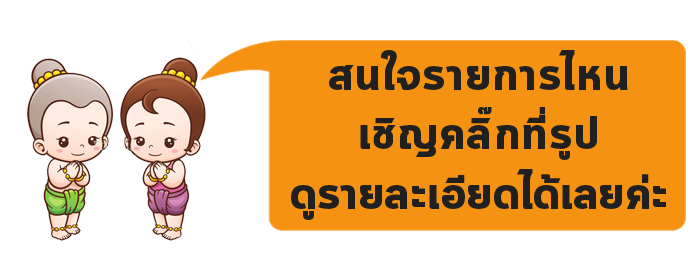
<style>
.page{position:relative;width:700px;height:280px;background:#ffffff}
.page>*{position:absolute;margin:0}
.t1{font:46.9px "Cloud-Bold";letter-spacing:0.01em;color:#202020;scale:1.05 1}
.t2{font:46.9px "Cloud-Bold";letter-spacing:-0.005em;color:#202020;scale:1.05 1}
</style>
<div class="page">
<p class="t1" style="left:291px;top:50px;width:375px;height:170px;text-align:center">สนใจรายการไหน<br>เชิญคลิ๊กที่รูป<br><span class="t2">ดูรายละเอียดได้เลยค่ะ</span></p>
</div>
